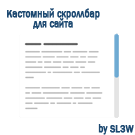
<style>
.page{position:relative;width:135px;height:135px;background:#ffffff}
.page>*{position:absolute;margin:0}
.t1{font:10.8px/10px "FranklinGothic-Medium";color:#1d4971;font-weight:bold;scale:0.83 1}
.t2{font:10.8px "FranklinGothic-Medium";color:#1d4971;font-weight:bold;scale:0.83 1}
</style>
<div class="page">
<p class="t1" style="left:7px;top:8px;width:93px;height:21px;text-align:center">Кастомный скроллбар<br>для сайта</p>
<p class="t2" style="left:98px;top:124px;width:36px;height:11px">by SL3W</p>
</div>
